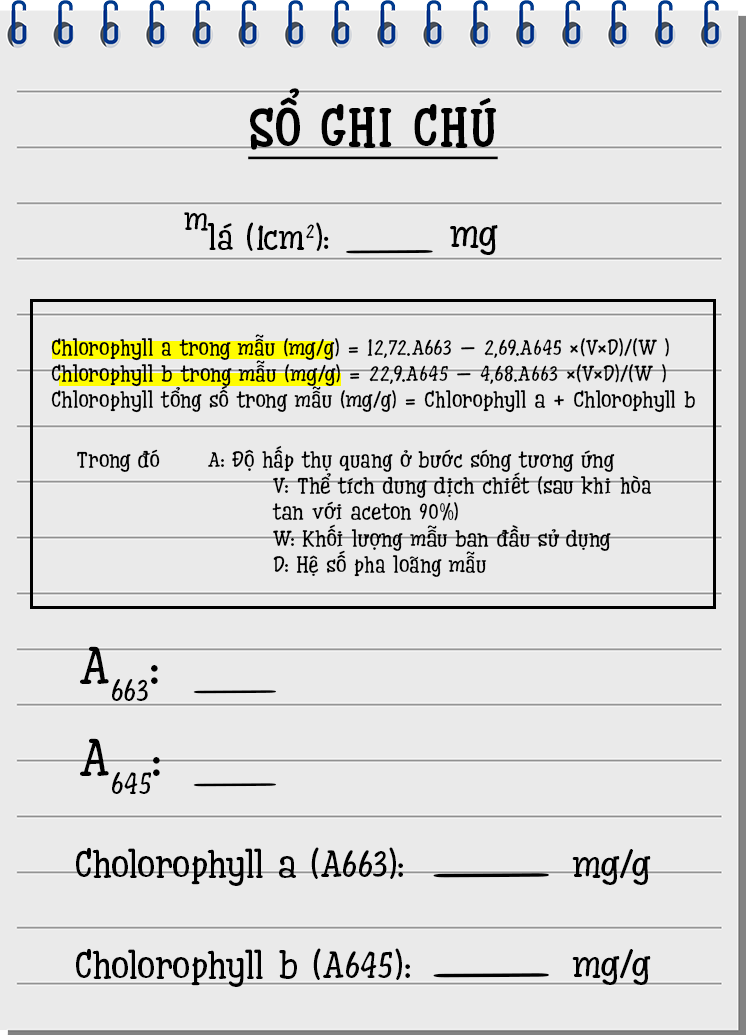
<style>
.page{position:relative;width:746px;height:1035px;background:#eaeaea}
.page>*{position:absolute;margin:0}
.t1{font:54.1px "iCielCucho-Bold";color:#000000;text-decoration:underline}
.t2{font:34.1px "iCielCucho";color:#000000}
.t3{font:56.1px "iCielCucho";color:#000000}
.t4{font:39.2px "iCielCucho";color:#000000}
.t5{font:34.1px "iCielCucho";letter-spacing:0.04em;color:#000000;scale:5.94 1}
.t6{font:21.9px "iCielCucho";color:#000000}
.t7{font:53.2px "iCielCucho";color:#000000}
.t8{font:32.4px "iCielCucho";letter-spacing:0.04em;color:#000000;scale:5.94 1}
.t9{font:37.9px "iCielCucho";color:#000000}
.t10{font:45.4px "iCielCucho";letter-spacing:0.04em;color:#000000;scale:5.94 1}
</style>
<div class="page">
<p class="t1" style="left:248px;top:88px;width:250px;height:72px">SỔ GHI CHÚ</p>
<p class="t2" style="left:184px;top:212px;width:145px;height:39px"><span class="t3">m</span>lá (1cm2):</p>
<p class="t4" style="left:450px;top:225px;width:48px;height:30px">mg</p>
<p class="t5" style="left:346px;top:250px;width:87px;height:4px">_</p>
<p class="t6" style="left:51px;top:334px;width:644px;height:79px">Chlorophyll a trong mẫu (mg/g) = 12,72.A663 – 2,69.A645 ×(V×D)/(W )<br>Chlorophyll b trong mẫu (mg/g) = 22,9.A645 – 4,68.A663 ×(V×D)/(W )<br>Chlorophyll tổng số trong mẫu (mg/g) = Chlorophyll a + Chlorophyll b</p>
<p class="t6" style="left:77px;top:445px;width:575px;height:132px">Trong đó  A: Độ hấp thụ quang ở bước sóng tương ứng<br>   V: Thể tích dung dịch chiết (sau khi hòa<br>   tan với aceton 90%)<br>   W: Khối lượng mẫu ban đầu sử dụng<br>   D: Hệ số pha loãng mẫu</p>
<p class="t7" style="left:80px;top:646px;width:78px;height:55px">A663:</p>
<p class="t8" style="left:193px;top:690px;width:83px;height:4px">_</p>
<p class="t7" style="left:80px;top:738px;width:80px;height:56px">A645:</p>
<p class="t8" style="left:193px;top:783px;width:83px;height:4px">_</p>
<p class="t9" style="left:76px;top:847px;width:327px;height:39px">Cholorophyll a (A663):</p>
<p class="t9" style="left:572px;top:849px;width:79px;height:36px">mg/g</p>
<p class="t10" style="left:433px;top:873px;width:116px;height:5px">_</p>
<p class="t9" style="left:76px;top:948px;width:334px;height:39px">Cholorophyll b (A645):</p>
<p class="t9" style="left:572px;top:949px;width:79px;height:36px">mg/g</p>
<p class="t10" style="left:433px;top:973px;width:116px;height:5px">_</p>
</div>
